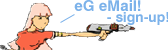
<style>
.page{position:relative;width:168px;height:50px;background:#ffffff}
.page>*{position:absolute;margin:0}
.t1{font:14.9px "Swiss721BT-Bold";color:#7cb2ea}
.t2{font:13.9px "Swiss721BT-Bold";color:#7cb2ea}
</style>
<div class="page">
<p class="t1" style="left:74px;top:0px;width:67px;height:11px">eG eMail!</p>
<p class="t2" style="left:107px;top:12px;width:62px;height:13px">- sign-up!</p>
</div>
